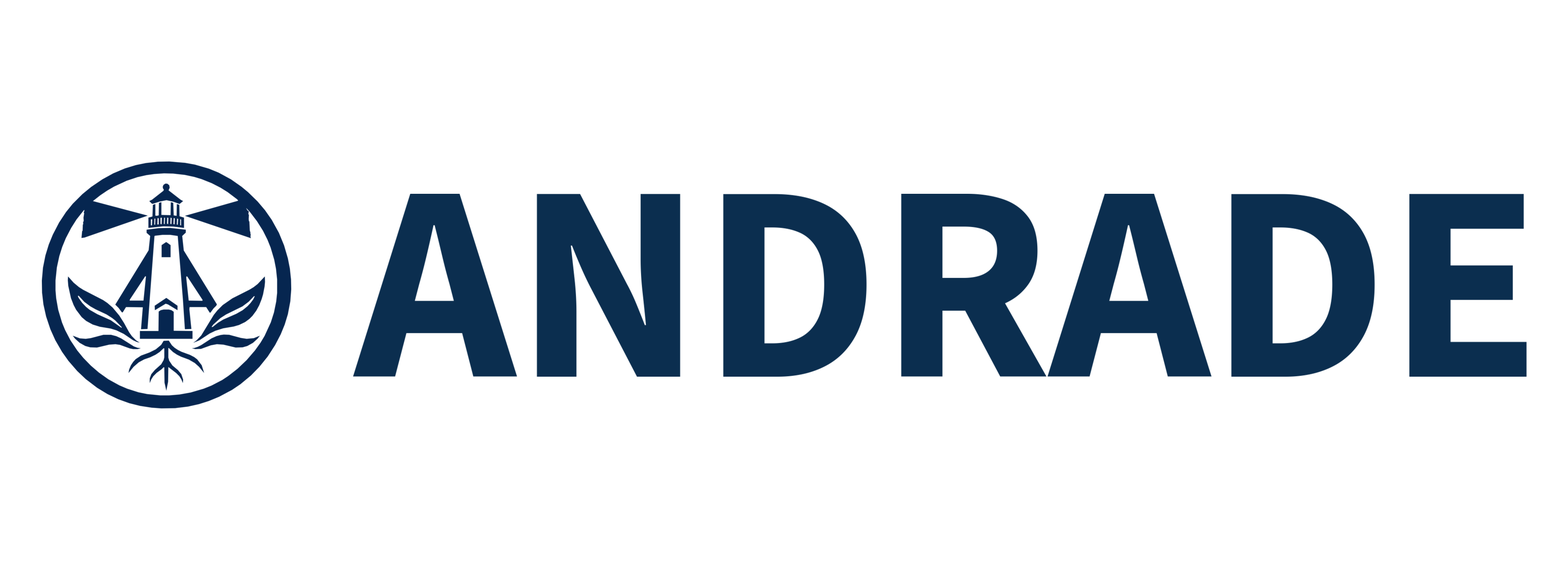
<style>
.page{position:relative;width:1568px;height:570px;background:#ffffff}
.page>*{position:absolute;margin:0}
.t1{font:308.8px "SourceSans3Roman-Semibold";color:#0b2e4f}
</style>
<div class="page">
<p class="t1" style="left:0px;top:0px;width:1568px;height:570px">ANDRADE</p>
</div>
